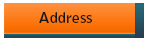
<style>
.page{position:relative;width:144px;height:40px}
.page>*{position:absolute;margin:0}
.t1{font:13.9px "BellGothicStd-Bold";color:#181818;scale:1.15 1}
</style>
<div class="page">
<p class="t1" style="left:39px;top:12px;width:53px;height:11px">Address</p>
</div>
